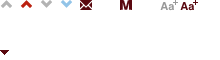
<style>
.page{position:relative;width:220px;height:60px;background:#ffffff}
.page>*{position:absolute;margin:0}
.t1{font:13px "Helvetica-Bold";color:#5a0910;text-transform:uppercase;scale:1.2 1}
.t2{font:11px "Helvetica-Bold";color:#999999}
.t3{font:11px "Helvetica-Bold";color:#5a0910}
</style>
<div class="page">
<p class="t1" style="left:120px;top:0px;width:12px;height:10px">M</p>
<p class="t2" style="left:160px;top:2px;width:14px;height:9px">Aa</p>
<p class="t3" style="left:180px;top:2px;width:14px;height:9px">Aa</p>
</div>
